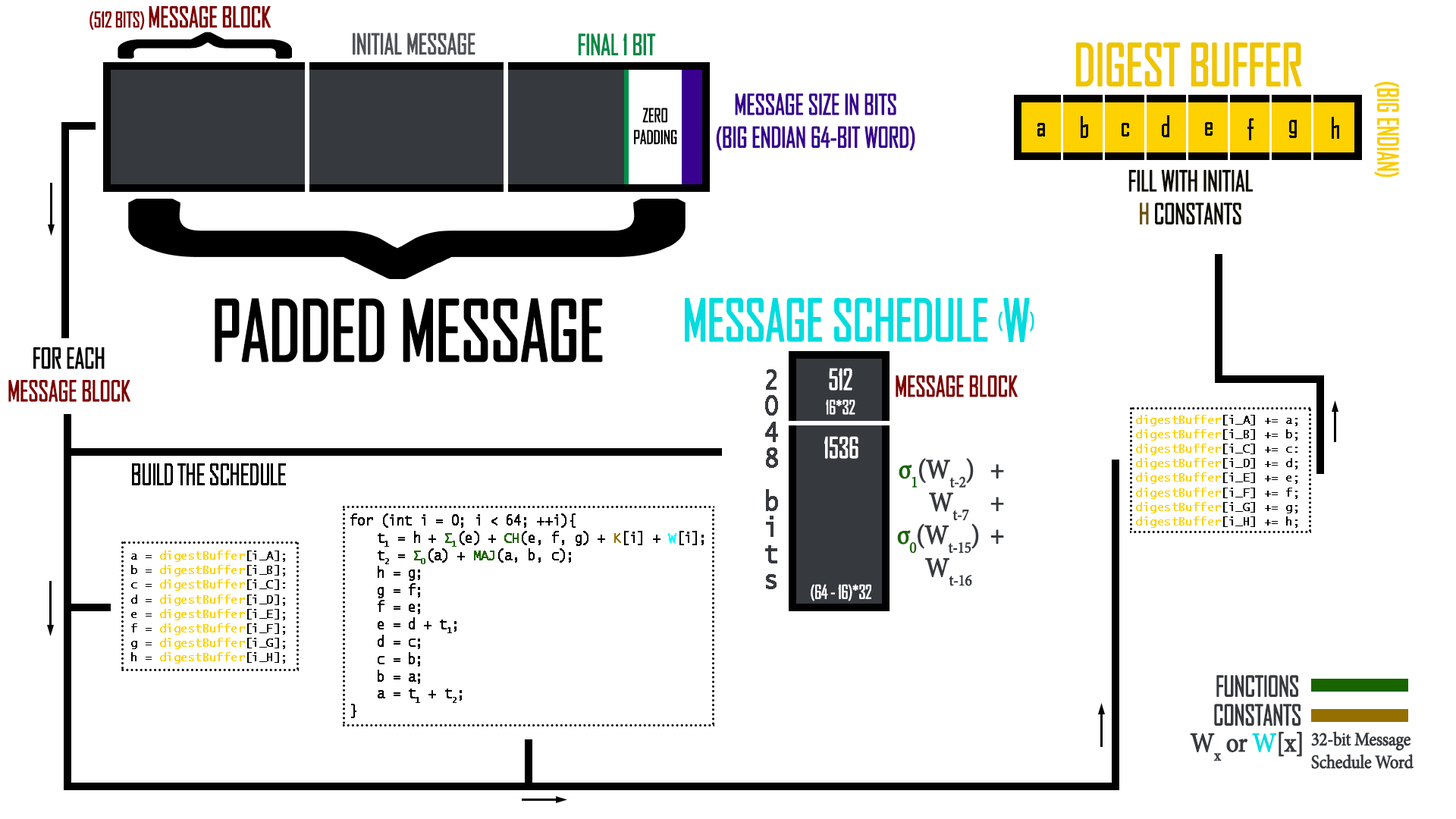
<style>
.page{position:relative;width:1456px;height:819px;background:#ffffff}
.page>*{position:absolute;margin:0}
.t1{font:27.3px "AgencyFB-Reg";letter-spacing:-0.04em;color:#810000;text-transform:uppercase;font-weight:bold;scale:0.91 1}
.t2{font:20.5px "AgencyFB-Reg";letter-spacing:-0.04em;color:#810000;text-transform:uppercase;font-weight:bold;scale:0.91 1}
.t3{font:191.1px "AgencyFB-Reg";letter-spacing:-0.04em;color:#000000;text-transform:uppercase;font-weight:bold;scale:0.47 1}
.t4{font:27.3px "AgencyFB-Reg";letter-spacing:-0.04em;color:#4f5359;text-transform:uppercase;font-weight:bold;scale:0.91 1}
.t5{font:27.3px "AgencyFB-Reg";letter-spacing:-0.04em;color:#048a47;text-transform:uppercase;font-weight:bold;scale:0.91 1}
.t6{font:55.4px "AgencyFB-Reg";letter-spacing:-0.04em;color:#efc500;text-transform:uppercase;font-weight:bold;scale:0.91 1}
.t7{font:27.3px "AgencyFB-Reg";letter-spacing:-0.04em;color:#f9cd00;text-transform:uppercase;font-weight:bold;scale:0.91 1}
.t8{font:27.3px "AgencyFB-Reg";letter-spacing:-0.04em;color:#38018f;text-transform:uppercase;font-weight:bold;scale:0.91 1}
.t9{font:18.2px "AgencyFB-Reg";letter-spacing:-0.04em;color:#000000;text-transform:uppercase;font-weight:bold;scale:0.91 1}
.t10{font:27.3px "AgencyFB-Reg";letter-spacing:-0.04em;color:#0f0c00;font-weight:bold;scale:0.91 1}
.t11{font:27.3px "AgencyFB-Reg";letter-spacing:-0.04em;color:#0f0c00;text-transform:uppercase;font-weight:bold;scale:0.91 1}
.t12{font:27.3px "AgencyFB-Reg";letter-spacing:-0.04em;color:#6b5000;text-transform:uppercase;font-weight:bold;scale:0.91 1}
.t13{font:80.4px "AgencyFB-Reg";letter-spacing:-0.04em;color:#000000;text-transform:uppercase;font-weight:bold;scale:0.91 1}
.t14{font:55.4px "AgencyFB-Reg";letter-spacing:-0.04em;color:#00dcdf;font-weight:bold;scale:0.91 1}
.t15{font:37.2px "AgencyFB-Reg";letter-spacing:-0.04em;color:#00dcdf;font-weight:bold;scale:0.91 1}
.t16{font:27.3px "AgencyFB-Reg";letter-spacing:-0.04em;color:#000000;text-transform:uppercase;font-weight:bold;scale:0.91 1}
.t17{font:24.8px "LucidaConsole";letter-spacing:-0.04em;color:#36393e;font-weight:bold;scale:1.1 1}
.t18{font:27.3px "AgencyFB-Reg";letter-spacing:-0.04em;color:#ffffff;text-transform:uppercase;font-weight:bold;scale:0.91 1}
.t19{font:27.3px "AgencyFB-Reg";letter-spacing:-0.04em;color:#810000;font-weight:bold;scale:0.91 1}
.t20{font:18.2px "AgencyFB-Reg";letter-spacing:-0.04em;color:#ffffff;text-transform:uppercase;font-weight:bold;scale:0.91 1}
.t21{font:12.1px "LucidaConsole";letter-spacing:-0.04em;color:#fed100;font-weight:bold;scale:0.91 1}
.t22{font:12.1px "LucidaConsole";letter-spacing:-0.04em;color:#000000;font-weight:bold;scale:0.91 1}
.t23{font:27.3px "MinionPro-Regular";letter-spacing:-0.04em;color:#36393e;font-weight:bold;scale:0.91 1}
.t24{font:27.3px "MinionPro-Regular";letter-spacing:-0.04em;color:#186500;font-weight:bold;scale:0.91 1}
.t25{font:27.3px "AgencyFB-Reg";letter-spacing:-0.04em;color:#000000;font-weight:bold;scale:0.91 1}
.t26{font:14.4px "LucidaConsole";letter-spacing:-0.04em;color:#000200;font-weight:bold;scale:0.91 1}
.t27{font:14.4px "LucidaConsole";letter-spacing:-0.04em;color:#000000;font-weight:bold;scale:0.91 1}
.t28{font:14.4px "LucidaConsole";letter-spacing:-0.04em;color:#0d3201;font-weight:bold;scale:0.91 1}
.t29{font:14.4px "LucidaConsole";letter-spacing:-0.04em;color:#4b3800;font-weight:bold;scale:0.91 1}
.t30{font:14.4px "LucidaConsole";letter-spacing:-0.04em;color:#01a1a3;font-weight:bold;scale:0.91 1}
.t31{font:14.4px "LucidaConsole";letter-spacing:-0.04em;color:#000101;font-weight:bold;scale:0.91 1}
.t32{font:27.3px "AgencyFB-Reg";letter-spacing:-0.04em;color:#36393e;text-transform:uppercase;font-weight:bold;scale:0.91 1}
.t33{font:27.3px "MinionPro-Regular";letter-spacing:-0.04em;color:#00dcdf;font-weight:bold;scale:0.91 1}
.t34{font:19px "MinionPro-Regular";letter-spacing:-0.04em;color:#36393e;font-weight:bold;scale:0.91 1}
</style>
<div class="page">
<p class="t1" style="left:89px;top:5px;width:182px;height:25px"><span class="t2">(512 bits) </span>Message block</p>
<p class="t3" style="left:118px;top:32px;width:174px;height:27px;rotate:90deg">{</p>
<p class="t4" style="left:353px;top:33px;width:122px;height:22px">Initial Message</p>
<p class="t5" style="left:578px;top:33px;width:78px;height:22px">Final 1 Bit</p>
<p class="t6" style="left:1076px;top:42px;width:226px;height:44px">Digest buffer</p>
<p class="t7" style="left:1374px;top:82px;width:25px;height:95px;rotate:90deg">(big endian)</p>
<p class="t8" style="left:716px;top:93px;width:199px;height:58px;text-align:center">Message Size in bits<br>(big endian 64-bit word)</p>
<p class="t9" style="left:634px;top:108px;width:43px;height:37px;text-align:center">zero<br>padding</p>
<p class="t10" style="left:1037px;top:123px;width:8px;height:13px">a</p>
<p class="t10" style="left:1081px;top:116px;width:7px;height:22px">b</p>
<p class="t10" style="left:1122px;top:123px;width:7px;height:13px">c</p>
<p class="t10" style="left:1162px;top:115px;width:7px;height:22px">d</p>
<p class="t10" style="left:1205px;top:122px;width:8px;height:14px">e</p>
<p class="t10" style="left:1247px;top:118px;width:7px;height:22px">f</p>
<p class="t10" style="left:1289px;top:120px;width:8px;height:18px">g</p>
<p class="t10" style="left:1332px;top:117px;width:7px;height:22px">h</p>
<p class="t11" style="left:1128px;top:170px;width:125px;height:54px;text-align:center">Fill With initial<br><span class="t12">h</span> constants</p>
<p class="t13" style="left:215px;top:298px;width:388px;height:64px">Padded Message</p>
<p class="t14" style="left:685px;top:297px;width:349px;height:45px">MESSAGE SCHEDULE <span class="t15">(</span>W<span class="t15">)</span></p>
<p class="t1" style="left:8px;top:347px;width:122px;height:55px;text-align:center"><span class="t16">For Each<br></span>Message Block</p>
<p class="t17" style="left:765px;top:369px;width:13px;height:220px;text-align:center">2048 bits</p>
<p class="t18" style="left:829px;top:368px;width:23px;height:23px">512</p>
<p class="t19" style="left:896px;top:375px;width:122px;height:22px">MESSAGE BLOCK</p>
<p class="t20" style="left:826px;top:400px;width:29px;height:15px">16*32</p>
<p class="t21" style="left:1136px;top:415px;width:161px;height:113px;text-align:center">digestBuffer<span class="t22">[i_A] += a;<br></span>digestBuffer<span class="t22">[i_B] += b;<br></span>digestBuffer<span class="t22">[i_C] += c:<br></span>digestBuffer<span class="t22">[i_D] += d;<br></span>digestBuffer<span class="t22">[i_E] += e;<br></span>digestBuffer<span class="t22">[i_F] += f;<br></span>digestBuffer<span class="t22">[i_G] += g;<br></span>digestBuffer<span class="t22">[i_H] += h;</span></p>
<p class="t18" style="left:824px;top:436px;width:34px;height:23px">1536</p>
<p class="t23" style="left:897px;top:458px;width:107px;height:128px;text-align:right"><span class="t24">σ1</span>(Wt-2)   +<br>Wt-7    +<br><span class="t24">σ0</span>(Wt-15)  +<br>Wt-16</p>
<p class="t25" style="left:132px;top:463px;width:154px;height:22px">BUILD THE SCHEDULE</p>
<p class="t26" style="left:350px;top:513px;width:354px;height:205px"><span class="t27">for (int i = 0; i &lt; 64; ++i){<br> t1 = h + </span><span class="t28">Σ1</span><span class="t27">(e) + </span><span class="t28">CH</span><span class="t27">(e, f, g) + </span><span class="t29">K</span><span class="t27">[i] + </span><span class="t30">W</span><span class="t31">[i];<br> t</span><span class="t27">2 = </span><span class="t28">Σ0</span><span class="t27">(a) + </span><span class="t28">MAJ</span>(a, b, c);<br> h = g; <br> g = f; <br> f = e;<br> e = d + t1;<br> d = c; <br> c = b; <br> b = a;<br> a = t1 + t2;<br>}</p>
<p class="t21" style="left:131px;top:551px;width:154px;height:113px;text-align:center"><span class="t22">a =</span> digestBuffer<span class="t22">[i_A];<br>b =</span> digestBuffer<span class="t22">[i_B];<br>c =</span> digestBuffer<span class="t22">[i_C]:<br>d =</span> digestBuffer<span class="t22">[i_D];<br>e =</span> digestBuffer<span class="t22">[i_E];<br>f =</span> digestBuffer<span class="t22">[i_F];<br>g =</span> digestBuffer<span class="t22">[i_G];<br>h =</span> digestBuffer<span class="t22">[i_H];</span></p>
<p class="t20" style="left:811px;top:584px;width:60px;height:17px">(64 - 16)*32</p>
<p class="t32" style="left:1216px;top:675px;width:82px;height:22px">Functions</p>
<p class="t32" style="left:1214px;top:704px;width:87px;height:22px">Constants</p>
<p class="t23" style="left:1190px;top:732px;width:112px;height:29px">Wx or <span class="t33">W</span>[x]</p>
<p class="t34" style="left:1311px;top:731px;width:103px;height:38px">32-bit Message <br>Schedule Word</p>
</div>
